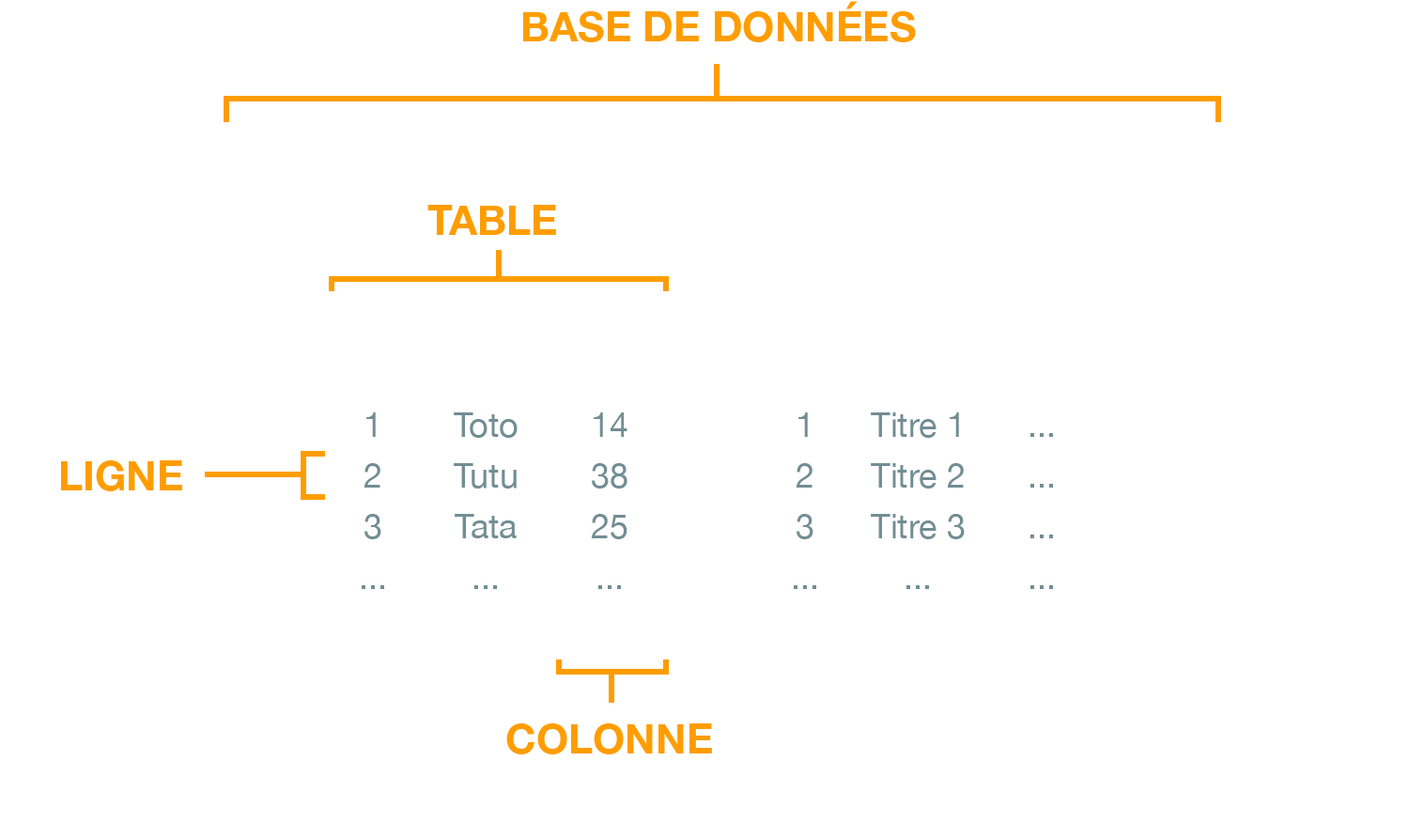
<style>
.page{position:relative;width:1424px;height:838px;background:#ffffff}
.page>*{position:absolute;margin:0}
.t1{font:41.3px "HelveticaNeue-Bold";color:#ff9d00}
.t2{font:33.8px "HelveticaNeue";color:#728d94}
</style>
<div class="page">
<p class="t1" style="left:523px;top:1px;width:393px;height:41px">BASE DE DONNÉES</p>
<p class="t1" style="left:427px;top:205px;width:129px;height:30px">TABLE</p>
<p class="t2" style="left:366px;top:412px;width:10px;height:25px">1</p>
<p class="t2" style="left:454px;top:412px;width:63px;height:26px">Toto</p>
<p class="t2" style="left:593px;top:412px;width:34px;height:25px">14</p>
<p class="t2" style="left:798px;top:412px;width:10px;height:25px">1</p>
<p class="t2" style="left:870px;top:412px;width:89px;height:26px">Titre 1</p>
<p class="t2" style="left:1030px;top:433px;width:23px;height:4px">...</p>
<p class="t1" style="left:61px;top:460px;width:121px;height:31px">LIGNE</p>
<p class="t2" style="left:363px;top:463px;width:17px;height:24px">2</p>
<p class="t2" style="left:454px;top:463px;width:62px;height:25px">Tutu</p>
<p class="t2" style="left:592px;top:463px;width:35px;height:25px">38</p>
<p class="t2" style="left:795px;top:463px;width:17px;height:24px">2</p>
<p class="t2" style="left:870px;top:463px;width:93px;height:25px">Titre 2</p>
<p class="t2" style="left:1030px;top:484px;width:23px;height:3px">...</p>
<p class="t2" style="left:364px;top:514px;width:17px;height:25px">3</p>
<p class="t2" style="left:454px;top:514px;width:62px;height:24px">Tata</p>
<p class="t2" style="left:591px;top:514px;width:36px;height:25px">25</p>
<p class="t2" style="left:796px;top:514px;width:17px;height:25px">3</p>
<p class="t2" style="left:870px;top:514px;width:94px;height:25px">Titre 3</p>
<p class="t2" style="left:1030px;top:534px;width:23px;height:4px">...</p>
<p class="t2" style="left:362px;top:585px;width:22px;height:4px">...</p>
<p class="t2" style="left:474px;top:585px;width:23px;height:4px">...</p>
<p class="t2" style="left:598px;top:585px;width:23px;height:4px">...</p>
<p class="t2" style="left:793px;top:585px;width:23px;height:4px">...</p>
<p class="t2" style="left:906px;top:585px;width:23px;height:4px">...</p>
<p class="t2" style="left:1030px;top:585px;width:23px;height:4px">...</p>
<p class="t1" style="left:506px;top:723px;width:206px;height:31px">COLONNE</p>
</div>
